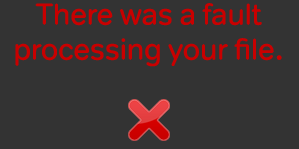
<style>
.page{position:relative;width:299px;height:149px;background:#333333}
.page>*{position:absolute;margin:0}
.t1{font:30px/35px "NOWTVText-Regular";letter-spacing:-0.025em;color:#c90000}
.t2{font:36px/35px "NOWTVText-Regular";letter-spacing:-0.025em;color:#c90000}
</style>
<div class="page">
<p class="t1" style="left:15px;top:3px;width:267px;height:64px;text-align:center">There was a fault<br>processing your file<span class="t2">.</span></p>
</div>
